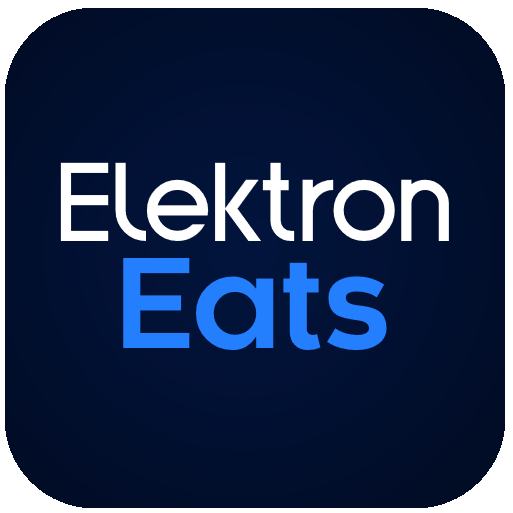
<style>
.page{position:relative;width:513px;height:513px}
.page>*{position:absolute;margin:0}
.t1{font:96px "YaroSt";color:#ffffff}
.t2{font:120px "Kaleko105-Bold";color:#247fff}
</style>
<div class="page">
<p class="t1" style="left:60px;top:162px;width:389px;height:79px">Elektron</p>
<p class="t2" style="left:123px;top:258px;width:264px;height:93px">Eats</p>
</div>
